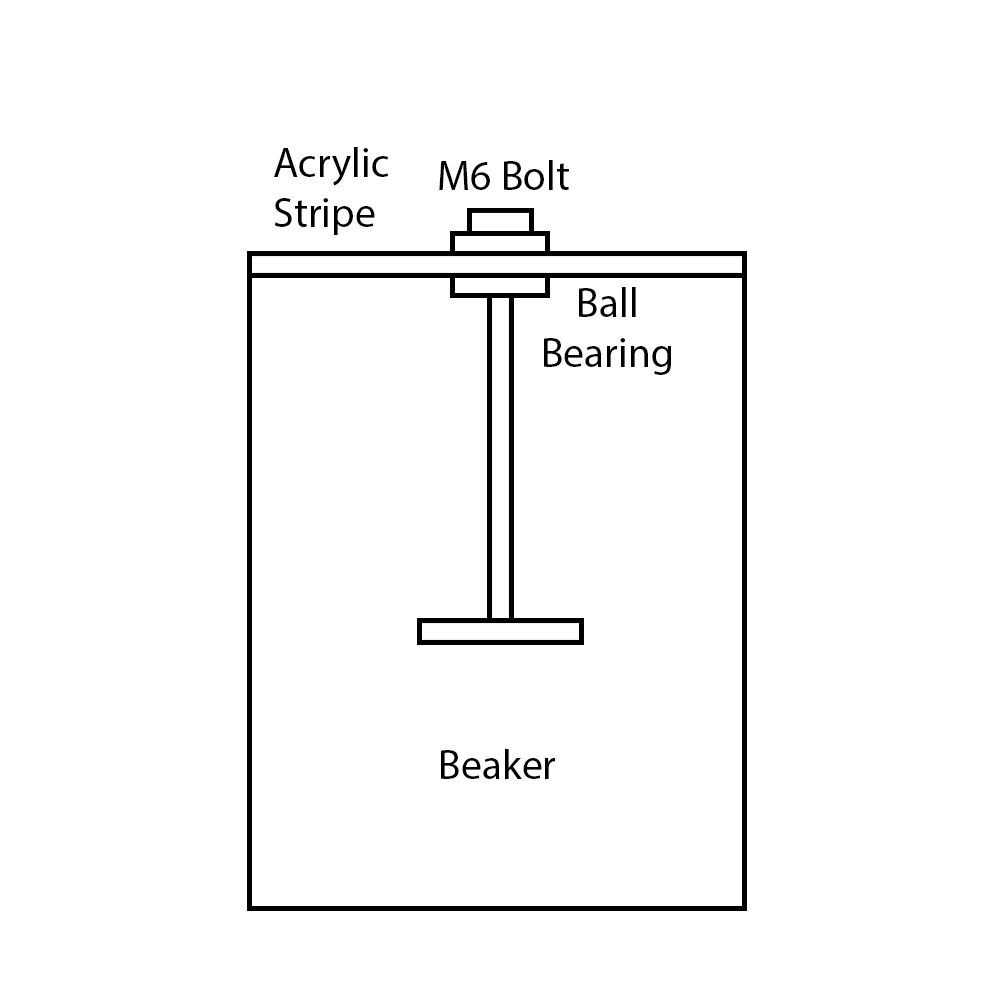
<style>
.page{position:relative;width:1000px;height:1000px;background:#ffffff}
.page>*{position:absolute;margin:0}
.t1{font:41.7px "MyriadPro-Regular";color:#000000}
</style>
<div class="page">
<p class="t1" style="left:274px;top:147px;width:115px;height:88px">Acrylic <br>Stripe</p>
<p class="t1" style="left:439px;top:160px;width:130px;height:30px">M6 Bolt</p>
<p class="t1" style="left:544px;top:287px;width:128px;height:88px;text-align:center">Ball <br>Bearing</p>
<p class="t1" style="left:441px;top:749px;width:114px;height:30px">Beaker</p>
</div>
